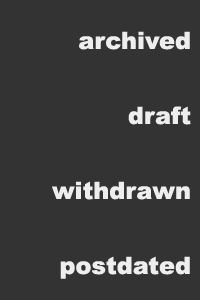
<style>
.page{position:relative;width:200px;height:300px;background:#333333}
.page>*{position:absolute;margin:0}
.t1{font:24px/75px "Arial-Black";color:#eeeeee}
</style>
<div class="page">
<p class="t1" style="left:52px;top:31px;width:139px;height:248px;text-align:right">archived<br>draft<br>withdrawn<br>postdated</p>
</div>
